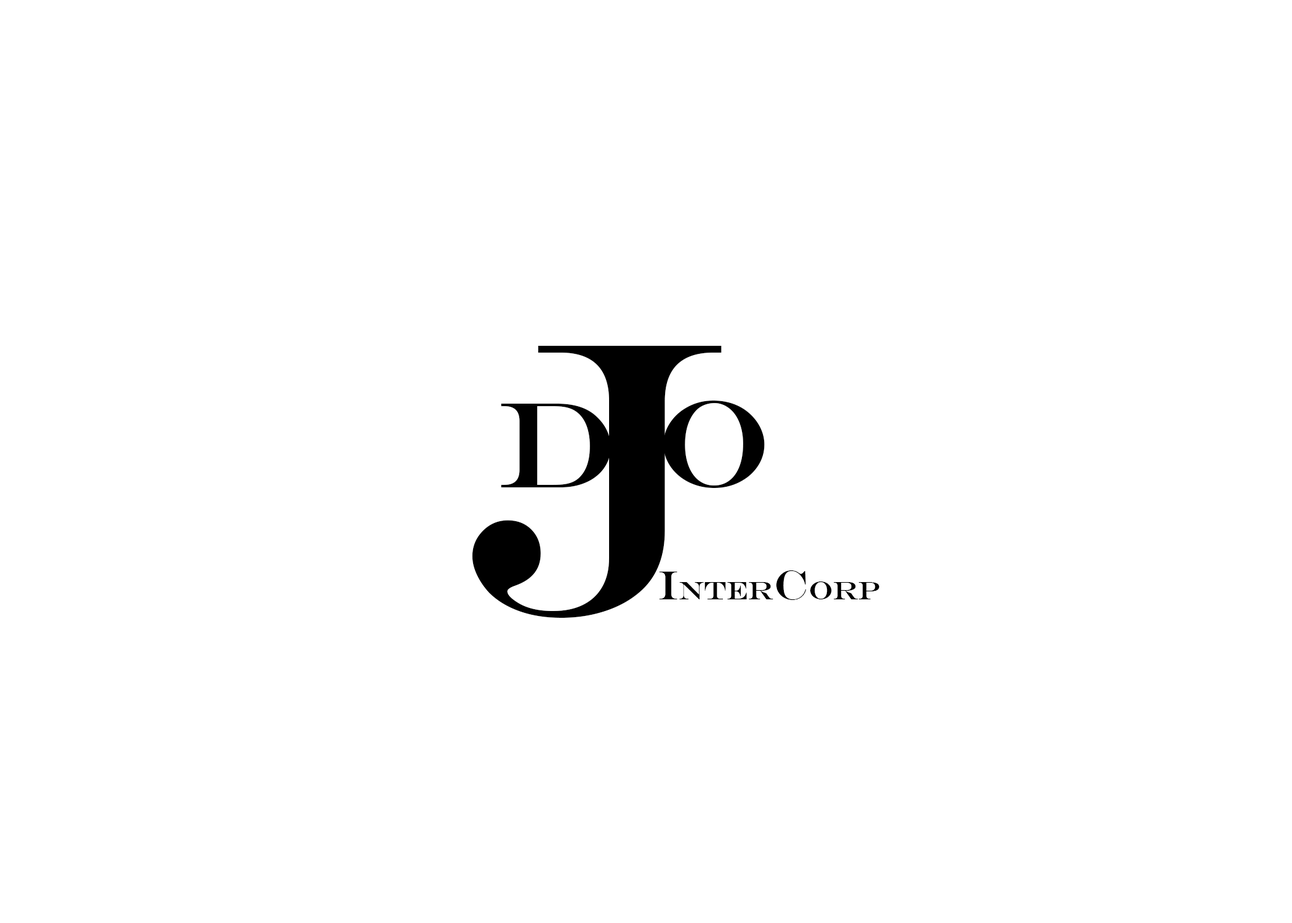
<style>
.page{position:relative;width:1292px;height:923px;background:#ffffff}
.page>*{position:absolute;margin:0}
.t1{font:389.7px "EngraversMT";color:#000000}
.t2{font:123.1px "EngraversMT";color:#000000}
.t3{font:25.6px "EngraversMT";color:#000000}
.t4{font:41px "EngraversMT";color:#000000}
</style>
<div class="page">
<p class="t1" style="left:472px;top:346px;width:250px;height:272px">J</p>
<p class="t2" style="left:663px;top:401px;width:102px;height:87px">O</p>
<p class="t2" style="left:501px;top:404px;width:110px;height:83px">D</p>
<p class="t3" style="left:659px;top:570px;width:220px;height:30px"><span class="t4">I</span>nter<span class="t4">c</span>orp</p>
</div>
